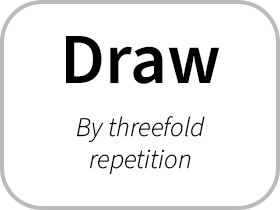
<style>
.page{position:relative;width:280px;height:210px;background:#ffffff}
.page>*{position:absolute;margin:0}
.t1{font:27px "SourceSansItalic-LightItalic";color:#000000}
.t2{font:72px "SourceSansRoman-Semibold";color:#000000}
</style>
<div class="page">
<p class="t1" style="left:66px;top:36px;width:154px;height:138px;text-align:center"><span class="t2">Draw<br> <br> <br></span>By threefold <br>repetition</p>
</div>
